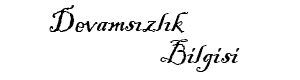
<style>
.page{position:relative;width:300px;height:80px;background:#ffffff}
.page>*{position:absolute;margin:0}
.t1{font:32px "BlackadderITC-Regular";color:#000000}
</style>
<div class="page">
<p class="t1" style="left:49px;top:5px;width:140px;height:28px">Devamsızlık</p>
<p class="t1" style="left:160px;top:39px;width:80px;height:33px">Bilgisi</p>
</div>
